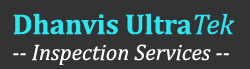
<style>
.page{position:relative;width:250px;height:69px;background:#333333}
.page>*{position:absolute;margin:0}
.t1{font:28.7px "Cambria-Bold";color:#29e7f3}
.t2{font:28.7px "Cambria-Italic";color:#29e7f3}
.t3{font:22.7px "Cambria-Italic";color:#ffffff}
</style>
<div class="page">
<p class="t1" style="left:13px;top:13px;width:222px;height:22px">Dhanvis Ultra<span class="t2">Tek</span></p>
<p class="t3" style="left:13px;top:44px;width:216px;height:21px">-- Inspection Services --</p>
</div>
